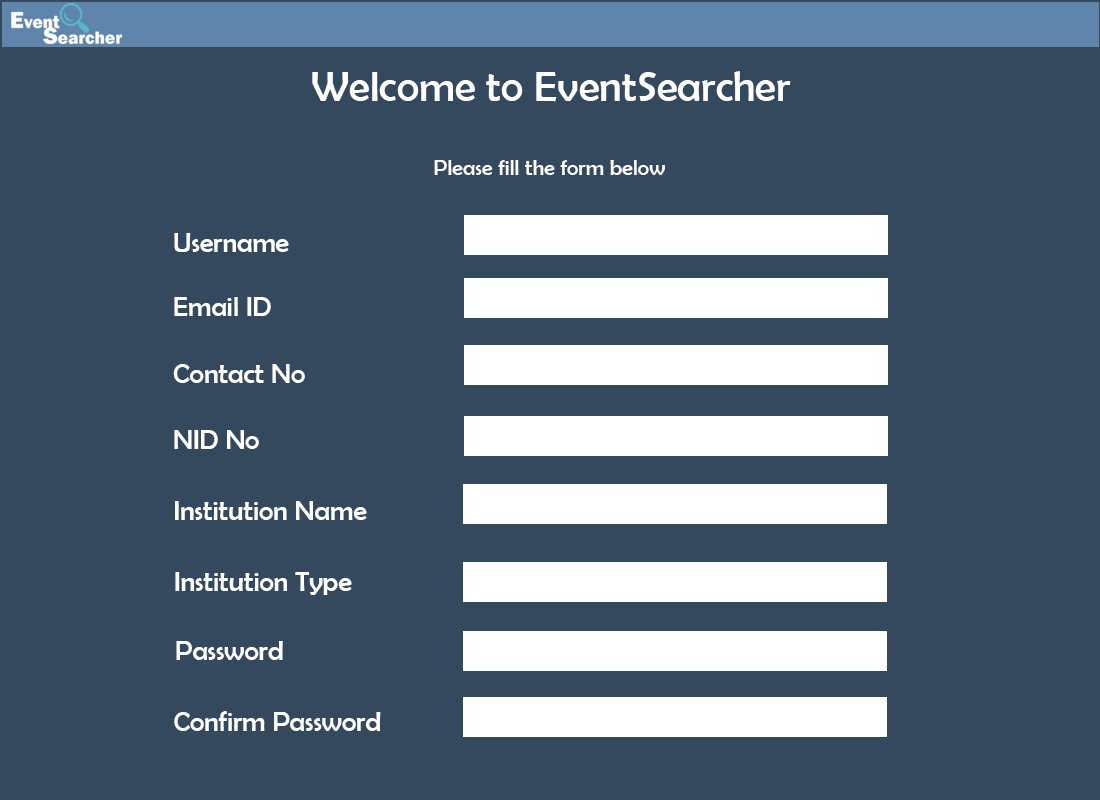
<style>
.page{position:relative;width:1100px;height:800px;background:#34495e}
.page>*{position:absolute;margin:0}
.t1{font:43.1px "BerlinSansFB-Reg";color:#ffffff}
.t2{font:22.2px "BerlinSansFB-Reg";color:#ffffff}
.t3{font:27.8px "BerlinSansFB-Reg";color:#ffffff}
</style>
<div class="page">
<p class="t1" style="left:312px;top:71px;width:479px;height:31px">Welcome to EventSearcher</p>
<p class="t2" style="left:434px;top:160px;width:231px;height:15px">Please fill the form below</p>
<p class="t3" style="left:174px;top:233px;width:115px;height:19px">Username</p>
<p class="t3" style="left:174px;top:297px;width:97px;height:19px">Email ID</p>
<p class="t3" style="left:173px;top:364px;width:132px;height:19px">Contact No</p>
<p class="t3" style="left:174px;top:430px;width:85px;height:19px">NID No</p>
<p class="t3" style="left:175px;top:501px;width:192px;height:19px">Institution Name</p>
<p class="t3" style="left:175px;top:572px;width:177px;height:23px">Institution Type</p>
<p class="t3" style="left:176px;top:641px;width:107px;height:19px">Password</p>
<p class="t3" style="left:174px;top:711px;width:207px;height:20px">Confirm Password</p>
</div>
